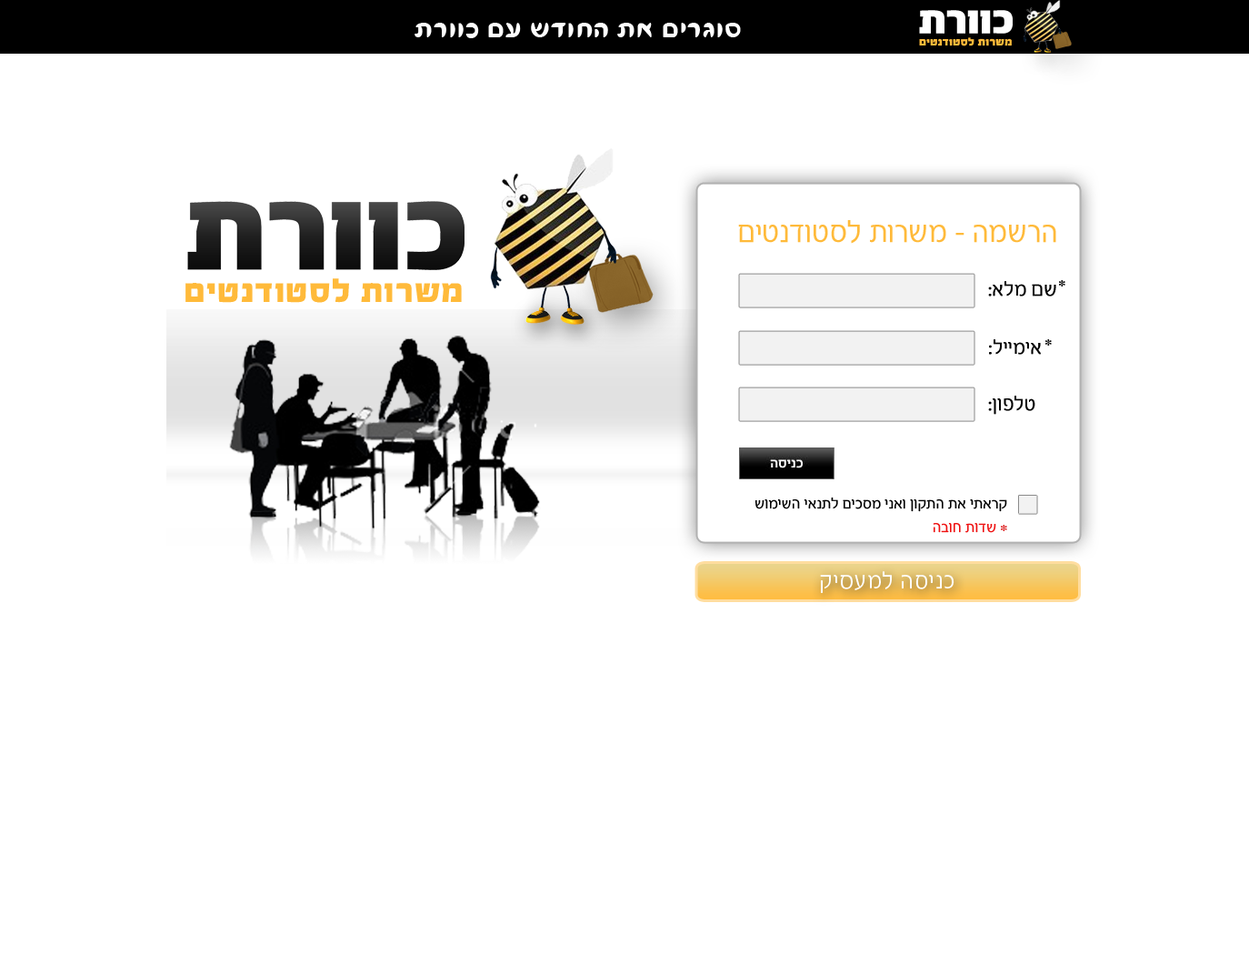
<style>
.page{position:relative;width:1249px;height:955px;background:#ffffff}
.page>*{position:absolute;margin:0}
.t1{font:31.8px "FbFlamingo-Regular";letter-spacing:0.03em;color:#ffffff}
.t2{font:10.9px "FbAdrenalin-Black";letter-spacing:0.03em;color:#ffba3a}
.t3{font:32.7px "FbElegantiRegular";letter-spacing:-0.01em;color:#ffba3a;font-weight:bold}
.t4{font:32.7px "FbAdrenalin-Black";letter-spacing:0.03em;color:#ffba3a}
.t5{font:21.8px "FbElegantiRegular";color:#000000;font-weight:bold}
.t6{font:21.8px "FbFlamingo-Regular";letter-spacing:0.03em;color:#000000}
.t7{font:16.4px "FbElegantiRegular";color:#000000;font-weight:bold}
.t8{font:16.4px "FbElegantiRegular";color:#ee1010;font-weight:bold}
.t9{font:21.8px "FbFlamingo-Regular";letter-spacing:0.03em;color:#dc1d1d}
.t10{font:25.5px "FbElegantiRegular";letter-spacing:0.03em;color:#ffffff}
</style>
<div class="page">
<p class="t1" style="left:415px;top:23px;width:326px;height:15px">תרווכ םע שדוחה תא םירגוס</p>
<p class="t2" style="left:919px;top:37px;width:93px;height:9px">םיטנדוטסל תורשמ</p>
<p class="t3" style="left:738px;top:220px;width:318px;height:24px">םיטנדוטסל תורשמ - המשרה</p>
<p class="t4" style="left:185px;top:278px;width:277px;height:25px">םיטנדוטסל תורשמ</p>
<p class="t5" style="left:988px;top:281px;width:68px;height:15px">:אלמ םש</p>
<p class="t6" style="left:1059px;top:280px;width:7px;height:6px">*</p>
<p class="t5" style="left:989px;top:339px;width:52px;height:16px">:ליימיא</p>
<p class="t6" style="left:1046px;top:339px;width:6px;height:6px">*</p>
<p class="t5" style="left:988px;top:395px;width:48px;height:20px">:ןופלט</p>
<p class="t7" style="left:755px;top:497px;width:252px;height:15px">שומישה יאנתל םיכסמ ינאו ןוקתה תא יתארק</p>
<p class="t8" style="left:933px;top:523px;width:63px;height:10px">הבוח תודש</p>
<p class="t9" style="left:1001px;top:525px;width:6px;height:6px">*</p>
<p class="t10" style="left:820px;top:571px;width:135px;height:22px">קיסעמל הסינכ</p>
</div>
